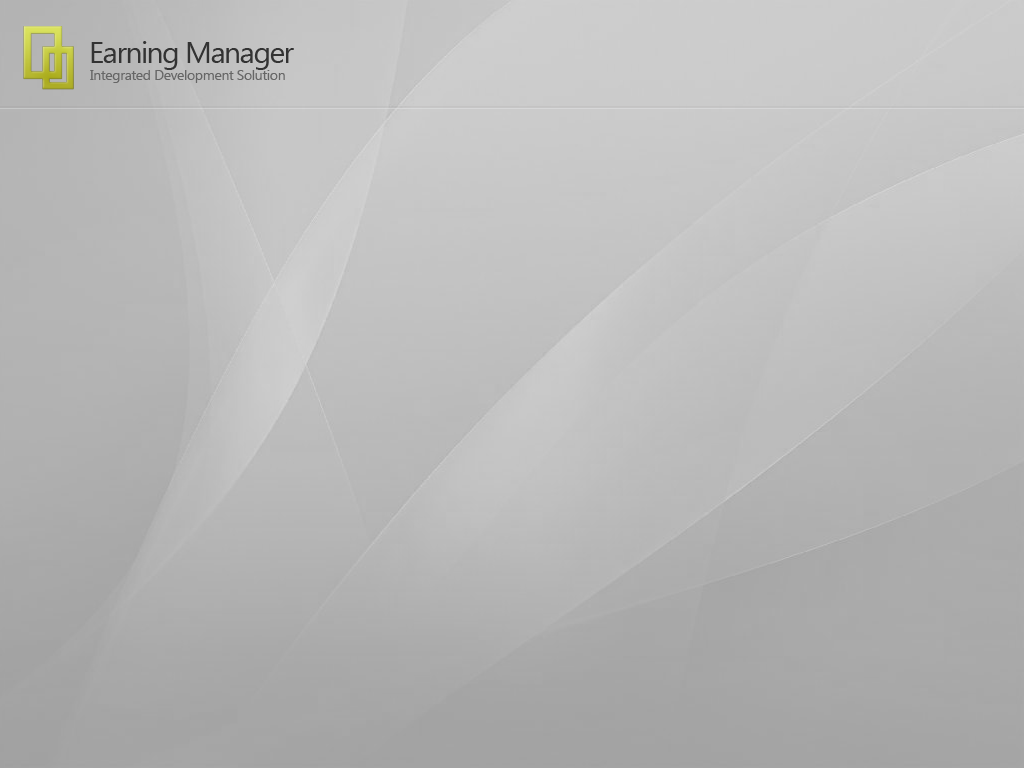
<style>
.page{position:relative;width:1024px;height:768px}
.page>*{position:absolute;margin:0}
.t1{font:30px "SegoeUI";letter-spacing:-0.05em;color:#333333}
.t2{font:14px "SegoeUI";letter-spacing:-0.025em;color:#666666}
</style>
<div class="page">
<p class="t1" style="left:91px;top:41px;width:203px;height:29px">Earning Manager</p>
<p class="t2" style="left:90px;top:70px;width:195px;height:13px">Integrated Development Solution</p>
</div>
